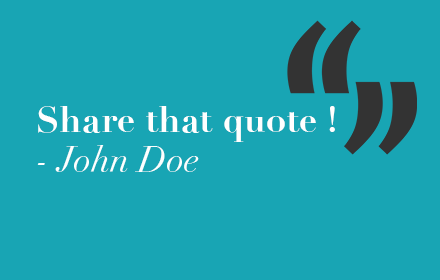
<style>
.page{position:relative;width:440px;height:280px;background:#18a5b4}
.page>*{position:absolute;margin:0}
.t1{font:36px/40px "Didot-Bold";color:#ffffff}
.t2{font:36px/40px "Didot-Italic";color:#fcffff}
</style>
<div class="page">
<p class="t1" style="left:37px;top:106px;width:298px;height:66px">Share that quote !<br><span class="t2">- John Doe</span></p>
</div>
